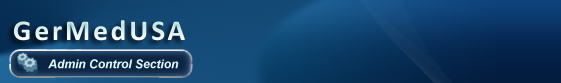
<style>
.page{position:relative;width:561px;height:83px}
.page>*{position:absolute;margin:0}
.t1{font:29px "Calibri-Bold";letter-spacing:0.1em;color:#e3f5ff}
.t2{font:12px "Arial-BoldItalicMT";color:#e3f5ff}
</style>
<div class="page">
<p class="t1" style="left:14px;top:20px;width:171px;height:21px">GerMedUSA</p>
<p class="t2" style="left:48px;top:59px;width:131px;height:10px">Admin Control Section</p>
</div>
